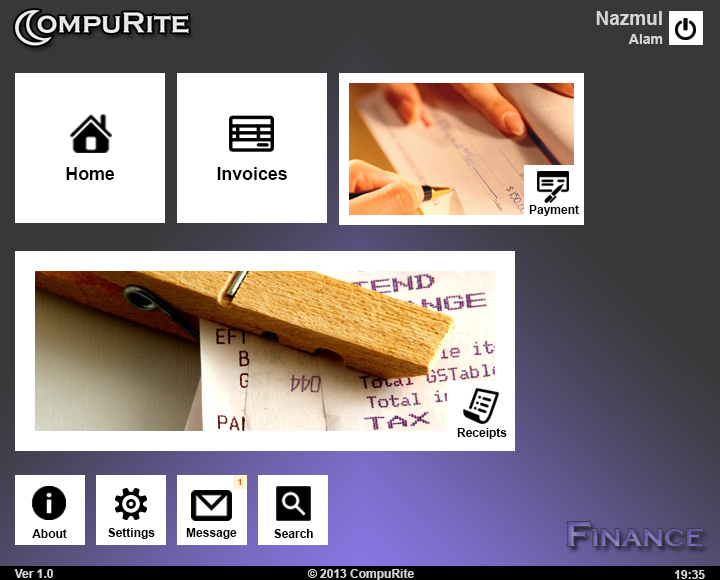
<style>
.page{position:relative;width:720px;height:580px;background:#ffffff}
.page>*{position:absolute;margin:0}
.t1{font:19px/18px "Arial-BoldMT";color:#d7d5d5}
.t2{font:14px/18px "Arial-BoldMT";color:#d7d5d5}
.t3{font:17.8px "Arial-BoldMT";color:#000000}
.t4{font:12px "Arial-BoldMT";color:#000000}
.t5{font:8px "Arial-BoldMT";color:#e8571e}
.t6{font:36px "CopperplateGothic-Bold";color:#7366ac;font-variant:small-caps}
.t7{font:12px "Arial-BoldMT";color:#d7d5d5}
</style>
<div class="page">
<p class="t1" style="left:596px;top:11px;width:67px;height:33px;text-align:right">Nazmul <br><span class="t2">Alam</span></p>
<p class="t3" style="left:66px;top:167px;width:49px;height:13px">Home</p>
<p class="t3" style="left:217px;top:167px;width:70px;height:13px">Invoices</p>
<p class="t4" style="left:529px;top:205px;width:50px;height:11px">Payment</p>
<p class="t4" style="left:457px;top:428px;width:50px;height:11px">Receipts</p>
<p class="t5" style="left:238px;top:479px;width:3px;height:6px">1</p>
<p class="t6" style="left:567px;top:521px;width:136px;height:26px">Finance</p>
<p class="t4" style="left:32px;top:529px;width:35px;height:9px">About</p>
<p class="t4" style="left:108px;top:528px;width:47px;height:11px">Settings</p>
<p class="t4" style="left:186px;top:528px;width:51px;height:11px">Message</p>
<p class="t4" style="left:274px;top:529px;width:39px;height:9px">Search</p>
<p class="t7" style="left:14px;top:569px;width:39px;height:9px">Ver 1.0</p>
<p class="t7" style="left:307px;top:569px;width:107px;height:11px">© 2013 CompuRite</p>
<p class="t7" style="left:675px;top:570px;width:30px;height:9px">19:35</p>
</div>
